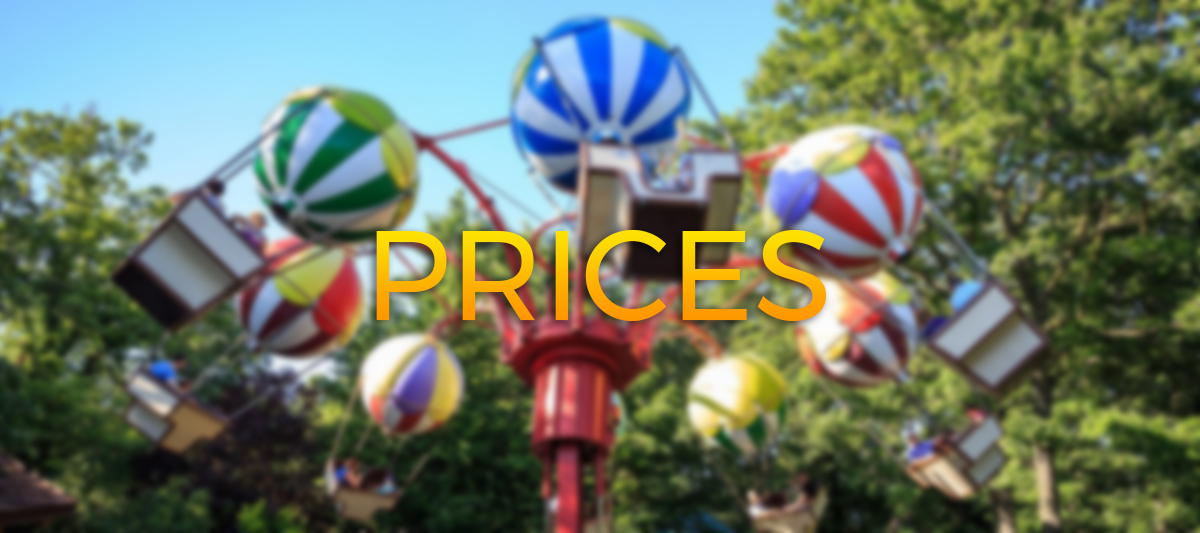
<style>
.page{position:relative;width:1200px;height:533px}
.page>*{position:absolute;margin:0}
.t1{font:128px "Montserrat-Regular"}
</style>
<div class="page">
<p class="t1" style="left:376px;top:230px;width:451px;height:91px">PRICES</p>
</div>
